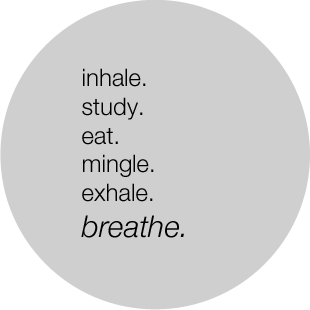
<style>
.page{position:relative;width:310px;height:310px;background:#cfcfcf}
.page>*{position:absolute;margin:0}
.t1{font:24px "HelveticaNeue-Light";color:#000000}
.t2{font:30px "HelveticaNeue-LightItalic";color:#000000}
</style>
<div class="page">
<p class="t1" style="left:81px;top:68px;width:103px;height:170px">inhale.<br>study.<br>eat.<br>mingle.<br>exhale.<br><span class="t2">breathe.</span></p>
</div>
